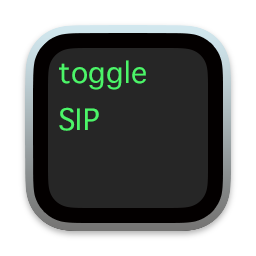
<style>
.page{position:relative;width:256px;height:256px;background:#262626}
.page>*{position:absolute;margin:0}
.t1{font:40px "AppleSymbols";letter-spacing:0.01em;color:#4cf569}
</style>
<div class="page">
<p class="t1" style="left:59px;top:60px;width:87px;height:30px">toggle</p>
<p class="t1" style="left:59px;top:107px;width:40px;height:24px">SIP</p>
</div>
